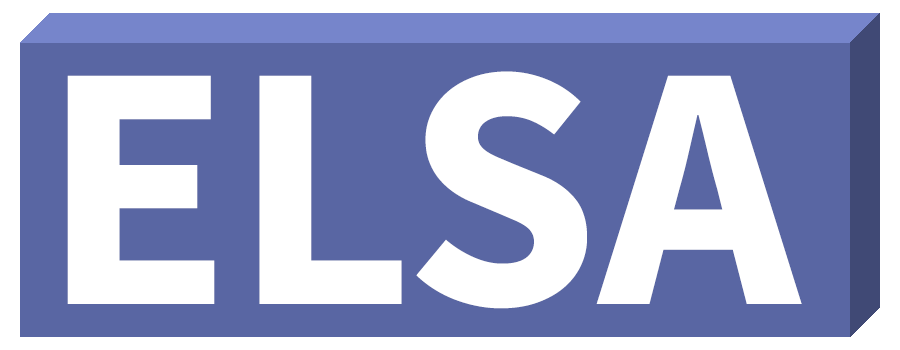
<style>
.page{position:relative;width:900px;height:350px;background:#5966a3}
.page>*{position:absolute;margin:0}
.t1{font:350px "SourceSansPro-Bold";color:#ffffff}
</style>
<div class="page">
<p class="t1" style="left:67px;top:71px;width:735px;height:238px">ELSA</p>
</div>
